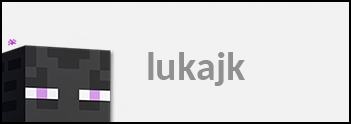
<style>
.page{position:relative;width:351px;height:124px;background:#f2f2f2}
.page>*{position:absolute;margin:0}
.t1{font:40.5px "Carlito-Bold";color:#909090}
</style>
<div class="page">
<p class="t1" style="left:148px;top:52px;width:97px;height:34px">lukajk</p>
</div>
